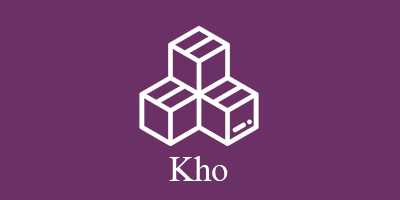
<style>
.page{position:relative;width:400px;height:200px;background:#6b3066}
.page>*{position:absolute;margin:0}
.t1{font:34.5px "TimesNewRomanPSMT";color:#ffffff}
</style>
<div class="page">
<p class="t1" style="left:169px;top:156px;width:59px;height:25px">Kho</p>
</div>
